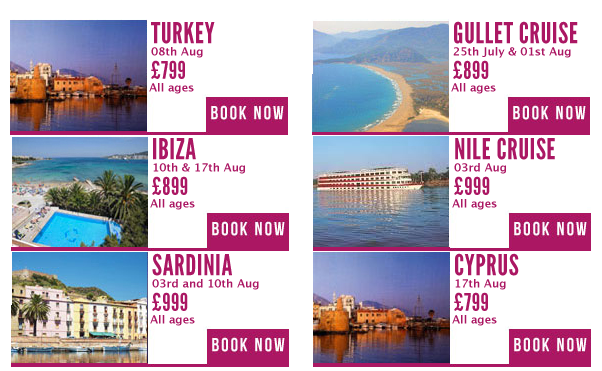
<style>
.page{position:relative;width:602px;height:371px;background:#ffffff}
.page>*{position:absolute;margin:0}
.t1{font:29px "LeagueGothic";letter-spacing:0.025em;color:#ab1763;text-transform:uppercase}
.t2{font:11px "LucidaGrande-Bold";color:#ab1763}
.t3{font:24px "LeagueGothic";letter-spacing:0.025em;color:#ab1763}
</style>
<div class="page">
<p class="t1" style="left:151px;top:22px;width:64px;height:22px">Turkey</p>
<p class="t1" style="left:454px;top:21px;width:124px;height:23px">gullet cruise</p>
<p class="t2" style="left:151px;top:47px;width:52px;height:11px">08th Aug</p>
<p class="t2" style="left:453px;top:47px;width:118px;height:11px">25th July &amp; 01st Aug</p>
<p class="t3" style="left:151px;top:60px;width:34px;height:19px">£799</p>
<p class="t3" style="left:453px;top:60px;width:36px;height:19px">£899</p>
<p class="t2" style="left:149px;top:83px;width:45px;height:11px">All ages</p>
<p class="t2" style="left:451px;top:83px;width:45px;height:11px">All ages</p>
<p class="t1" style="left:455px;top:137px;width:100px;height:23px">Nile Cruise</p>
<p class="t1" style="left:153px;top:138px;width:43px;height:22px">ibiza</p>
<p class="t2" style="left:153px;top:163px;width:92px;height:11px">10th &amp; 17th Aug</p>
<p class="t2" style="left:454px;top:163px;width:52px;height:11px">03rd Aug</p>
<p class="t3" style="left:152px;top:176px;width:36px;height:19px">£899</p>
<p class="t3" style="left:454px;top:176px;width:36px;height:19px">£999</p>
<p class="t2" style="left:150px;top:199px;width:45px;height:11px">All ages</p>
<p class="t2" style="left:452px;top:199px;width:45px;height:11px">All ages</p>
<p class="t1" style="left:152px;top:253px;width:80px;height:23px">sardinia</p>
<p class="t1" style="left:455px;top:253px;width:64px;height:23px">Cyprus</p>
<p class="t2" style="left:152px;top:279px;width:107px;height:11px">03rd and 10th Aug</p>
<p class="t2" style="left:455px;top:279px;width:51px;height:11px">17th Aug</p>
<p class="t3" style="left:152px;top:292px;width:36px;height:19px">£999</p>
<p class="t3" style="left:454px;top:292px;width:34px;height:19px">£799</p>
<p class="t2" style="left:150px;top:315px;width:45px;height:11px">All ages</p>
<p class="t2" style="left:452px;top:315px;width:45px;height:11px">All ages</p>
</div>
